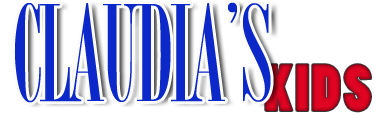
<style>
.page{position:relative;width:375px;height:115px;background:#ffffff}
.page>*{position:absolute;margin:0}
.t1{font:145.3px "BordeauxRomanBoldLetPlain";letter-spacing:-0.03em;color:#0d28c8;text-transform:uppercase}
.t2{font:62.3px "PoplarStd";letter-spacing:0.03em;text-transform:uppercase}
</style>
<div class="page">
<p class="t1" style="left:14px;top:2px;width:257px;height:101px">Claudia’s</p>
<p class="t2" style="left:265px;top:64px;width:106px;height:48px">kids</p>
</div>
